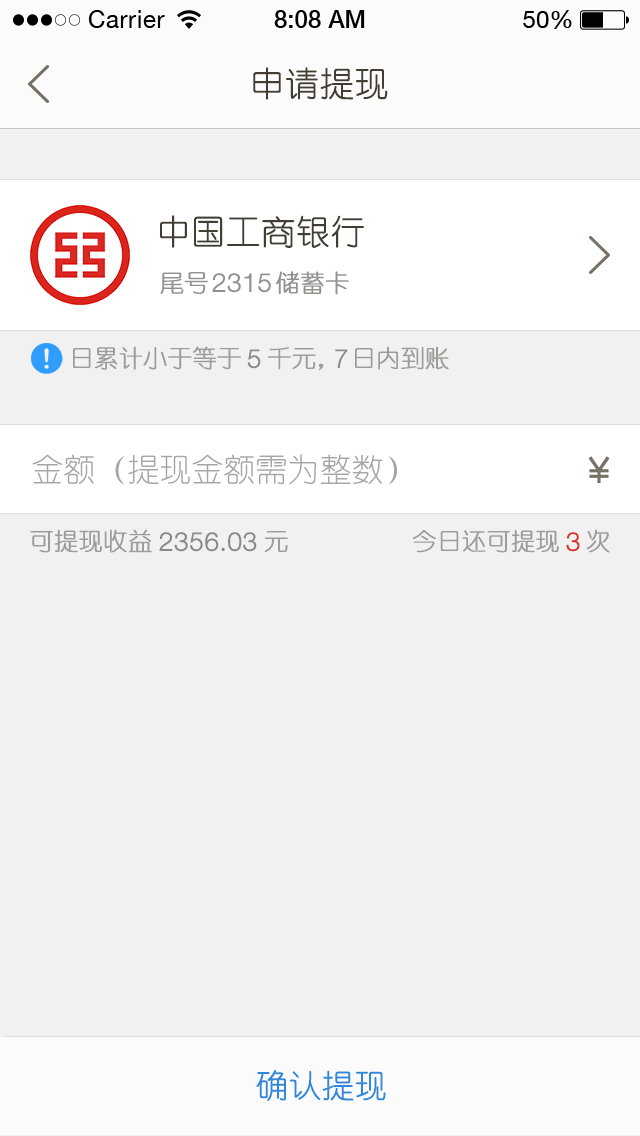
<style>
.page{position:relative;width:640px;height:1136px;background:#f1f1f1}
.page>*{position:absolute;margin:0}
.t1{font:34px "YouYuan";color:#433d33;text-transform:uppercase;font-weight:bold}
.t2{font:34px "YouYuan";color:#433e34;text-transform:uppercase;font-weight:bold}
.t3{font:24px "YouYuan";color:#93918d;text-transform:uppercase;font-weight:bold}
.t4{font:26px "HelveticaNeueLTPro-Lt";color:#93918d;text-transform:uppercase;font-weight:bold}
.t5{font:24px "YouYuan";color:#9e9c99;text-transform:uppercase;font-weight:bold}
.t6{font:26px "HelveticaNeueLTPro-Lt";color:#8b8985;text-transform:uppercase;font-weight:bold}
.t7{font:32px "YouYuan";color:#a7a6a3;text-transform:uppercase}
.t8{font:26px "HelveticaNeueLTPro-Lt";color:#db2c25;text-transform:uppercase;font-weight:bold}
.t9{font:32px "YouYuan";color:#2f88da;text-transform:uppercase;font-weight:bold}
</style>
<div class="page">
<p class="t1" style="left:253px;top:67px;width:135px;height:33px">申请提现</p>
<p class="t2" style="left:160px;top:215px;width:204px;height:33px">中国工商银行</p>
<p class="t3" style="left:160px;top:272px;width:48px;height:22px">尾号</p>
<p class="t4" style="left:212px;top:273px;width:59px;height:20px">2315</p>
<p class="t3" style="left:276px;top:271px;width:73px;height:24px">储蓄卡</p>
<p class="t5" style="left:73px;top:346px;width:168px;height:24px">日累计小于等于</p>
<p class="t6" style="left:247px;top:349px;width:14px;height:20px">5</p>
<p class="t5" style="left:268px;top:347px;width:56px;height:24px">千元，</p>
<p class="t6" style="left:335px;top:349px;width:13px;height:19px">7</p>
<p class="t5" style="left:355px;top:346px;width:94px;height:24px">日内到账</p>
<p class="t7" style="left:32px;top:454px;width:365px;height:31px">金额（提现金额需为整数）</p>
<p class="t5" style="left:30px;top:529px;width:122px;height:24px">可提现收益</p>
<p class="t6" style="left:159px;top:532px;width:98px;height:20px">2356.03</p>
<p class="t5" style="left:264px;top:531px;width:24px;height:21px">元</p>
<p class="t5" style="left:412px;top:530px;width:147px;height:23px">今日还可提现</p>
<p class="t8" style="left:566px;top:532px;width:14px;height:20px">3</p>
<p class="t5" style="left:586px;top:529px;width:24px;height:24px">次</p>
<p class="t9" style="left:256px;top:1070px;width:130px;height:31px">确认提现</p>
</div>
